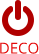
<style>
.page{position:relative;width:39px;height:54px;background:#ffffff}
.page>*{position:absolute;margin:0}
.t1{font:15px "OpenSans";color:#e40a0a}
</style>
<div class="page">
<p class="t1" style="left:0px;top:42px;width:39px;height:12px">DECO</p>
</div>
